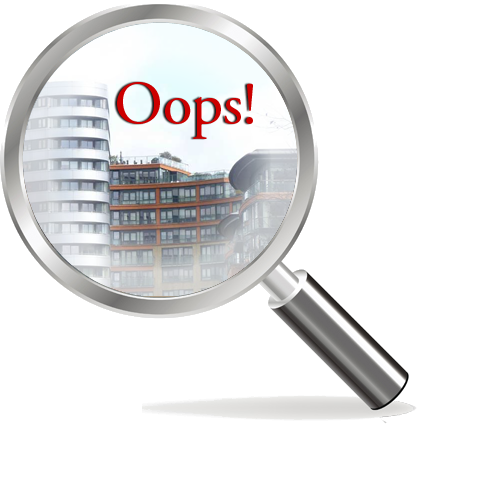
<style>
.page{position:relative;width:500px;height:500px;background:#ffffff}
.page>*{position:absolute;margin:0}
.t1{font:61px "AGaramondPro-Regular";color:#cc0000}
</style>
<div class="page">
<p class="t1" style="left:117px;top:82px;width:136px;height:57px">Oops!</p>
</div>
